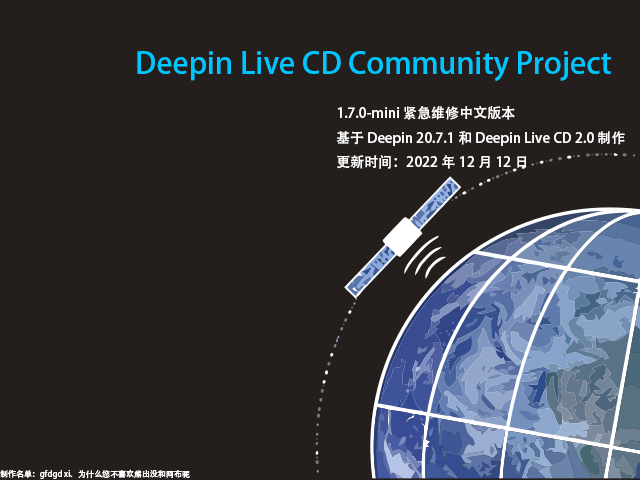
<style>
.page{position:relative;width:640px;height:480px;background:#241f1c}
.page>*{position:absolute;margin:0}
.t1{font:30px "AdobeHeitiStd-Regular";color:#00c6ff}
.t2{font:14px "AdobeHeitiStd-Regular";color:#ffffff}
.t3{font:8px "AdobeHeitiStd-Regular";color:#ffffff}
</style>
<div class="page">
<p class="t1" style="left:137px;top:51px;width:474px;height:30px">Deepin Live CD Community Project</p>
<p class="t2" style="left:336px;top:106px;width:289px;height:63px">1.7.0-mini 紧急维修中文版本<br>基于 Deepin 20.7.1和 Deepin Live CD 2.0 制作<br>更新时间：2022年12月12日</p>
<p class="t3" style="left:0px;top:469px;width:190px;height:10px">制作名单：gfdgd xi、为什么您不喜欢熊出没和阿布呢</p>
</div>
